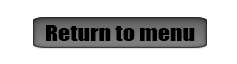
<style>
.page{position:relative;width:237px;height:64px;background:#ffffff}
.page>*{position:absolute;margin:0}
.t1{font:19.6px "Impact";color:#000000;scale:1.23 1}
</style>
<div class="page">
<p class="t1" style="left:46px;top:25px;width:149px;height:16px">Return to menu</p>
</div>
